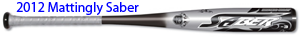
<style>
.page{position:relative;width:300px;height:37px;background:#ffffff}
.page>*{position:absolute;margin:0}
.t1{font:14px "MyriadPro-Regular";color:#0000ff}
</style>
<div class="page">
<p class="t1" style="left:16px;top:2px;width:123px;height:13px">2012 Mattingly Saber</p>
</div>
